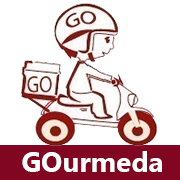
<style>
.page{position:relative;width:180px;height:180px;background:#ffffff}
.page>*{position:absolute;margin:0}
.t1{font:28px "SegoeUI-Bold";color:#ffffff}
</style>
<div class="page">
<p class="t1" style="left:22px;top:151px;width:140px;height:21px">GOurmeda</p>
</div>
